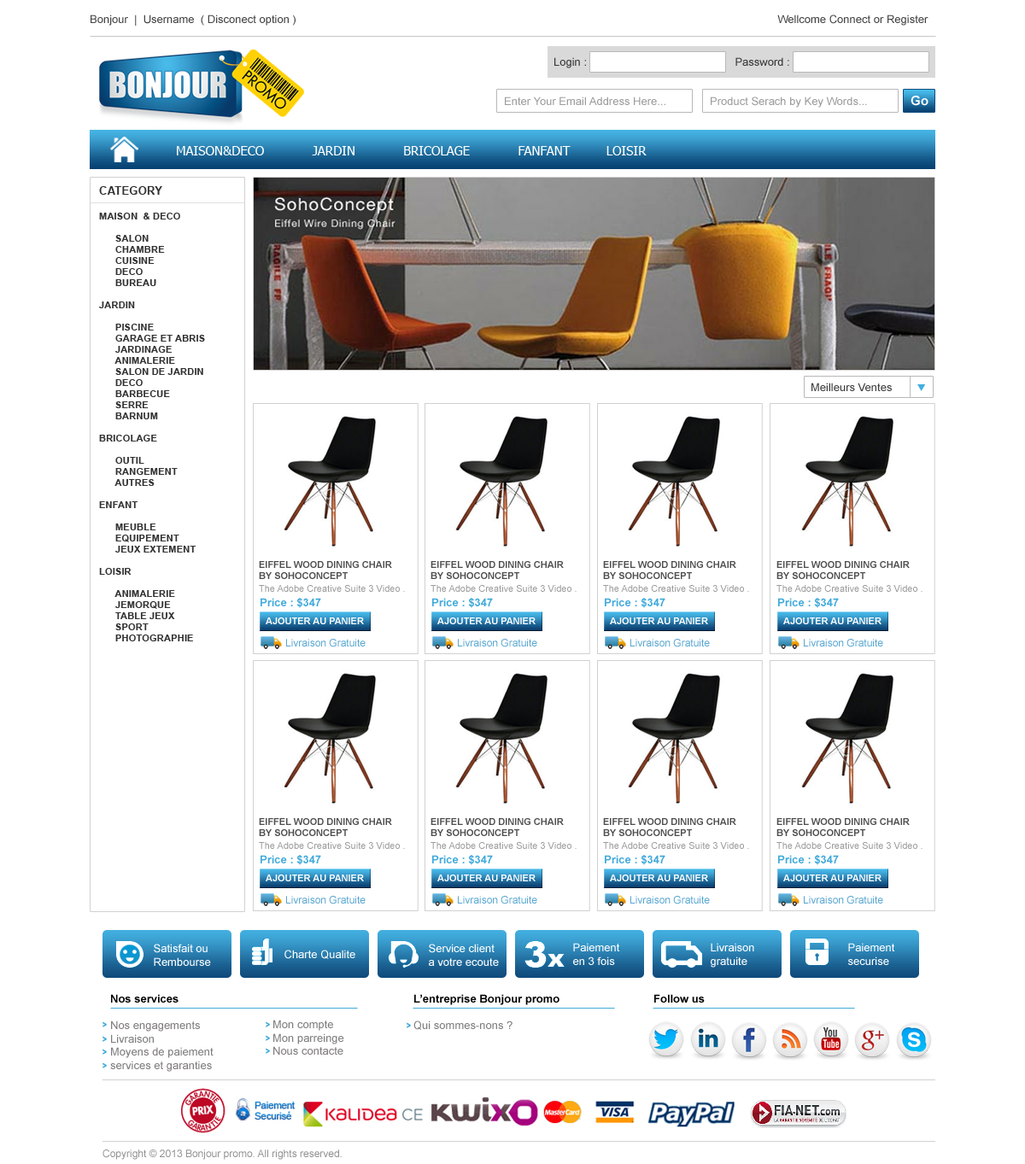
<style>
.page{position:relative;width:1025px;height:1164px;background:#ffffff}
.page>*{position:absolute;margin:0}
.t1{font:11.1px "ArialMT";color:#444444}
.t2{font:11.1px "ArialMT";color:#373737}
.t3{font:11.1px "ArialMT";color:#9c9c9c}
.t4{font:12.8px "Arial-BoldMT";color:#ffffff}
.t5{font:12.8px "Tahoma";color:#fefefe}
.t6{font:11.4px "Arial-BoldMT";color:#323232;text-transform:uppercase}
.t7{font:9.7px/11.1px "Arial-BoldMT";color:#323232}
.t8{font:11.1px "ArialMT";color:#3e3e3e}
.t9{font:9.4px "Arial-BoldMT";color:#4d4d4d}
.t10{font:9.4px/12.8px "ArialMT";color:#9c9c9c}
.t11{font:11.1px "Arial-BoldMT";color:#40aadb}
.t12{font:9.4px "Arial-BoldMT";color:#ffffff;text-transform:uppercase}
.t13{font:10.2px "ArialMT";color:#57a6d1}
.t14{font:11.1px "ArialMT";color:#ffffff}
.t15{font:11.1px "ArialMT";color:#807d7d}
.t16{font:11.1px "Arial-BoldMT";color:#000000}
.t17{font:8.5px "Bauhaus93";color:#3fa9da}
.t18{font:10.2px "ArialMT";color:#909090}
</style>
<div class="page">
<p class="t1" style="left:91px;top:15px;width:837px;height:11px">Bonjour  |  Username  ( Disconect option )                                                                                                                                                            Wellcome Connect or Register</p>
<p class="t2" style="left:554px;top:57px;width:235px;height:11px">Login :                                                Password :</p>
<p class="t3" style="left:505px;top:96px;width:160px;height:9px">Enter Your Email Address Here...</p>
<p class="t3" style="left:710px;top:96px;width:157px;height:12px">Product Serach by Key Words...</p>
<p class="t4" style="left:910px;top:96px;width:18px;height:10px">Go</p>
<p class="t5" style="left:177px;top:146px;width:469px;height:9px">MAISON&amp;DECO            JARDIN            BRICOLAGE            FANFANT         LOISIR</p>
<p class="t6" style="left:99px;top:186px;width:63px;height:9px">category</p>
<p class="t7" style="left:99px;top:213px;width:106px;height:428px">MAISON  &amp; DECO<br><br>      SALON<br>      CHAMBRE<br>      CUISINE<br>      DECO<br>      BUREAU<br><br>JARDIN<br><br>      PISCINE<br>      GARAGE ET ABRIS<br>      JARDINAGE<br>      ANIMALERIE<br>      SALON DE JARDIN<br>      DECO<br>      BARBECUE<br>      SERRE<br>      BARNUM<br><br>BRICOLAGE<br><br>      OUTIL<br>      RANGEMENT<br>      AUTRES<br><br>ENFANT<br><br>      MEUBLE<br>      EQUIPEMENT<br>      JEUX EXTEMENT<br><br>LOISIR<br><br>      ANIMALERIE<br>      JEMORQUE<br>      TABLE JEUX<br>      SPORT<br>      PHOTOGRAPHIE</p>
<p class="t8" style="left:811px;top:383px;width:80px;height:8px">Meilleurs Ventes</p>
<p class="t9" style="left:259px;top:561px;width:146px;height:31px">EIFFEL WOOD DINING CHAIR <br>BY SOHOCONCEPT<br><span class="t10">The Adobe Creative Suite 3 Video .</span></p>
<p class="t9" style="left:430px;top:561px;width:146px;height:31px">EIFFEL WOOD DINING CHAIR <br>BY SOHOCONCEPT<br><span class="t10">The Adobe Creative Suite 3 Video .</span></p>
<p class="t9" style="left:603px;top:561px;width:146px;height:31px">EIFFEL WOOD DINING CHAIR <br>BY SOHOCONCEPT<br><span class="t10">The Adobe Creative Suite 3 Video .</span></p>
<p class="t9" style="left:776px;top:561px;width:146px;height:31px">EIFFEL WOOD DINING CHAIR <br>BY SOHOCONCEPT<br><span class="t10">The Adobe Creative Suite 3 Video .</span></p>
<p class="t11" style="left:260px;top:598px;width:61px;height:10px">Price : $347</p>
<p class="t11" style="left:432px;top:598px;width:61px;height:10px">Price : $347</p>
<p class="t11" style="left:605px;top:598px;width:60px;height:10px">Price : $347</p>
<p class="t11" style="left:778px;top:598px;width:60px;height:10px">Price : $347</p>
<p class="t12" style="left:266px;top:617px;width:98px;height:7px">ajouter au panier</p>
<p class="t12" style="left:437px;top:617px;width:98px;height:7px">ajouter au panier</p>
<p class="t12" style="left:610px;top:617px;width:98px;height:7px">ajouter au panier</p>
<p class="t12" style="left:783px;top:617px;width:98px;height:7px">ajouter au panier</p>
<p class="t13" style="left:286px;top:639px;width:79px;height:8px">Livraison Gratuite</p>
<p class="t13" style="left:458px;top:639px;width:79px;height:8px">Livraison Gratuite</p>
<p class="t13" style="left:630px;top:639px;width:80px;height:8px">Livraison Gratuite</p>
<p class="t13" style="left:803px;top:639px;width:80px;height:8px">Livraison Gratuite</p>
<p class="t9" style="left:259px;top:818px;width:146px;height:31px">EIFFEL WOOD DINING CHAIR <br>BY SOHOCONCEPT<br><span class="t10">The Adobe Creative Suite 3 Video .</span></p>
<p class="t9" style="left:430px;top:818px;width:146px;height:31px">EIFFEL WOOD DINING CHAIR <br>BY SOHOCONCEPT<br><span class="t10">The Adobe Creative Suite 3 Video .</span></p>
<p class="t9" style="left:603px;top:818px;width:146px;height:31px">EIFFEL WOOD DINING CHAIR <br>BY SOHOCONCEPT<br><span class="t10">The Adobe Creative Suite 3 Video .</span></p>
<p class="t9" style="left:776px;top:818px;width:146px;height:31px">EIFFEL WOOD DINING CHAIR <br>BY SOHOCONCEPT<br><span class="t10">The Adobe Creative Suite 3 Video .</span></p>
<p class="t11" style="left:260px;top:855px;width:61px;height:10px">Price : $347</p>
<p class="t11" style="left:432px;top:855px;width:61px;height:10px">Price : $347</p>
<p class="t11" style="left:605px;top:855px;width:60px;height:10px">Price : $347</p>
<p class="t11" style="left:778px;top:855px;width:60px;height:10px">Price : $347</p>
<p class="t12" style="left:266px;top:874px;width:98px;height:7px">ajouter au panier</p>
<p class="t12" style="left:437px;top:874px;width:98px;height:7px">ajouter au panier</p>
<p class="t12" style="left:610px;top:874px;width:98px;height:7px">ajouter au panier</p>
<p class="t12" style="left:783px;top:874px;width:98px;height:7px">ajouter au panier</p>
<p class="t13" style="left:286px;top:896px;width:79px;height:8px">Livraison Gratuite</p>
<p class="t13" style="left:458px;top:896px;width:79px;height:8px">Livraison Gratuite</p>
<p class="t13" style="left:630px;top:896px;width:80px;height:8px">Livraison Gratuite</p>
<p class="t13" style="left:803px;top:896px;width:80px;height:8px">Livraison Gratuite</p>
<p class="t14" style="left:154px;top:943px;width:57px;height:23px">Satisfait ou<br>Rembourse</p>
<p class="t14" style="left:284px;top:949px;width:71px;height:10px">Charte Qualite</p>
<p class="t14" style="left:429px;top:943px;width:70px;height:23px">Service client<br>a votre ecoute</p>
<p class="t14" style="left:573px;top:943px;width:47px;height:22px">Paiement<br>en 3 fois</p>
<p class="t14" style="left:710px;top:943px;width:44px;height:24px">Livraison<br>gratuite</p>
<p class="t14" style="left:848px;top:943px;width:47px;height:22px">Paiement<br>securise</p>
<p class="t15" style="left:110px;top:994px;width:103px;height:78px"><span class="t16">Nos services <br><br></span>Nos engagements<br>Livraison<br>Moyens de paiement<br>services et garanties</p>
<p class="t16" style="left:413px;top:994px;width:146px;height:36px">L’entreprise Bonjour promo<br><br><span class="t15">Qui sommes-nons ?</span></p>
<p class="t16" style="left:654px;top:994px;width:50px;height:8px">Follow us</p>
<p class="t17" style="left:102px;top:1021px;width:5px;height:6px">&gt;</p>
<p class="t17" style="left:266px;top:1021px;width:4px;height:6px">&gt;</p>
<p class="t15" style="left:273px;top:1019px;width:71px;height:35px">Mon compte   <br>Mon parreinge   <br>Nous contacte</p>
<p class="t17" style="left:406px;top:1022px;width:5px;height:6px">&gt;</p>
<p class="t17" style="left:102px;top:1036px;width:5px;height:6px">&gt;</p>
<p class="t17" style="left:266px;top:1035px;width:4px;height:6px">&gt;</p>
<p class="t17" style="left:102px;top:1049px;width:5px;height:5px">&gt;</p>
<p class="t17" style="left:266px;top:1048px;width:4px;height:6px">&gt;</p>
<p class="t17" style="left:102px;top:1062px;width:5px;height:6px">&gt;</p>
<p class="t18" style="left:102px;top:1149px;width:240px;height:11px">Copyright © 2013 Bonjour promo. All rights reserved.</p>
</div>
